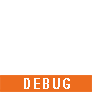
<style>
.page{position:relative;width:92px;height:92px;background:#ffffff}
.page>*{position:absolute;margin:0}
.t1{font:14.9px "ArialNarrow";letter-spacing:0.2em;color:#ffffff;font-weight:bold;scale:0.8 1}
</style>
<div class="page">
<p class="t1" style="left:24px;top:78px;width:46px;height:11px">DEBUG</p>
</div>
